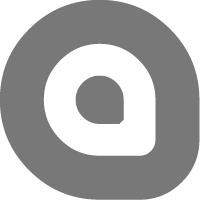
<style>
.page{position:relative;width:200px;height:200px;background:#787878}
.page>*{position:absolute;margin:0}
.t1{font:308px "PicoWhiteAl";color:#787878;font-weight:bold}
</style>
<div class="page">
<p class="t1" style="left:0px;top:0px;width:200px;height:200px">A</p>
</div>
